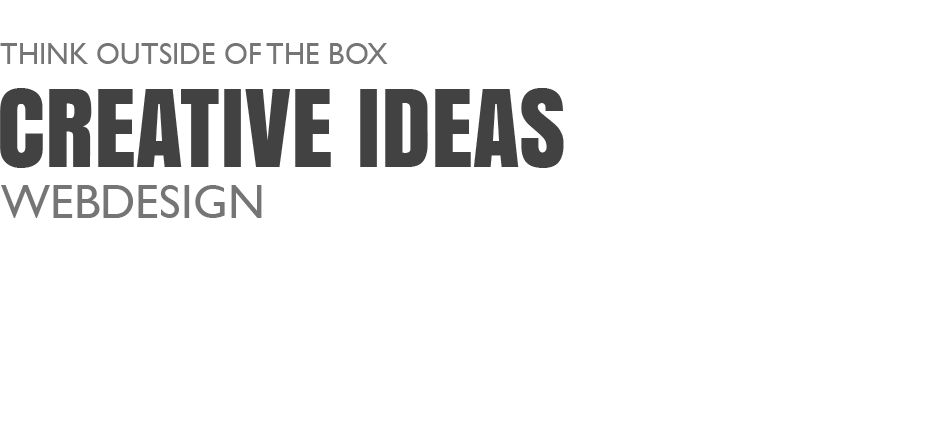
<style>
.page{position:relative;width:940px;height:430px;background:#ffffff}
.page>*{position:absolute;margin:0}
.t1{font:30px "GillSansMT";color:#757575;text-transform:uppercase}
.t2{font:100px "Anton";color:#424242;text-transform:uppercase}
.t3{font:48px "GillSansMT";color:#757575;text-transform:uppercase}
</style>
<div class="page">
<p class="t1" style="left:0px;top:43px;width:388px;height:21px">think outside of the box</p>
<p class="t2" style="left:0px;top:88px;width:564px;height:80px">creative ideas</p>
<p class="t3" style="left:1px;top:185px;width:261px;height:33px">WEBDESIGN</p>
</div>
